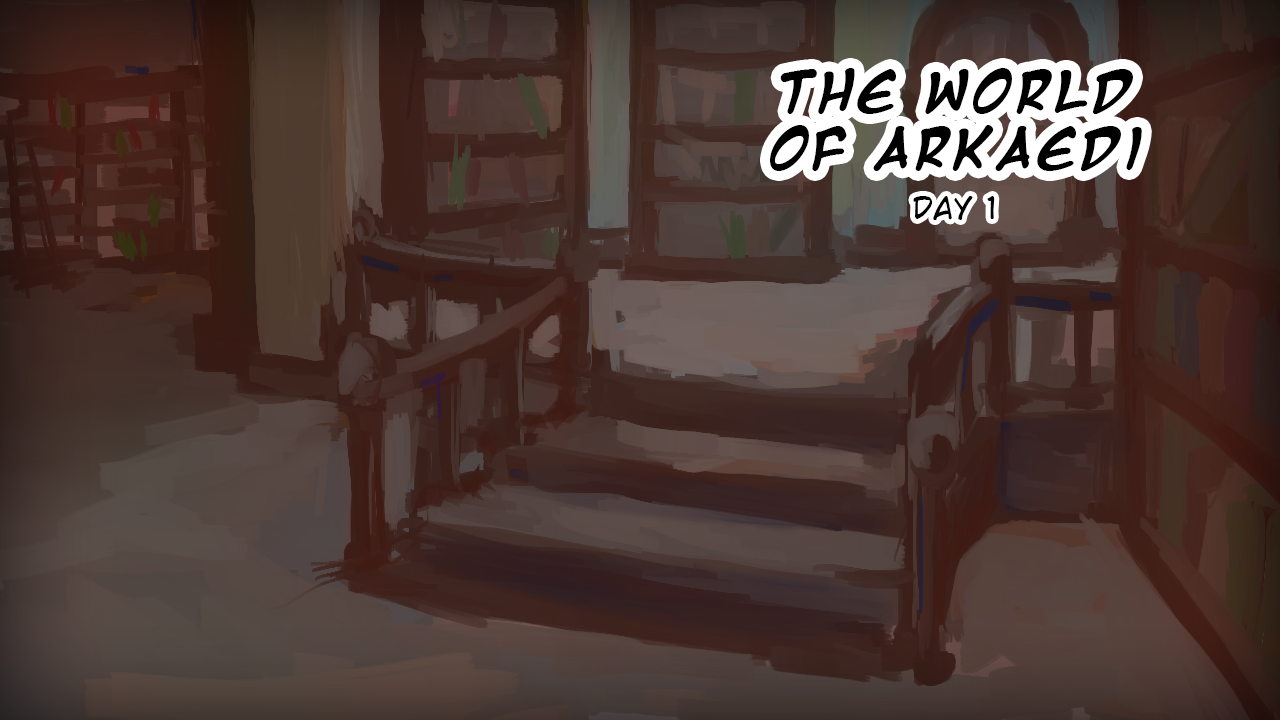
<style>
.page{position:relative;width:1280px;height:720px}
.page>*{position:absolute;margin:0}
.t1{font:47.4px "MangaTempleBold";letter-spacing:0.05em;color:#000000}
.t2{font:29.4px "WildWordsRoman";letter-spacing:0.05em;color:#000000}
</style>
<div class="page">
<p class="t1" style="left:770px;top:68px;width:372px;height:103px;text-align:center">The World<br>of Arkaedi</p>
<p class="t2" style="left:913px;top:196px;width:82px;height:24px">Day 1</p>
</div>
